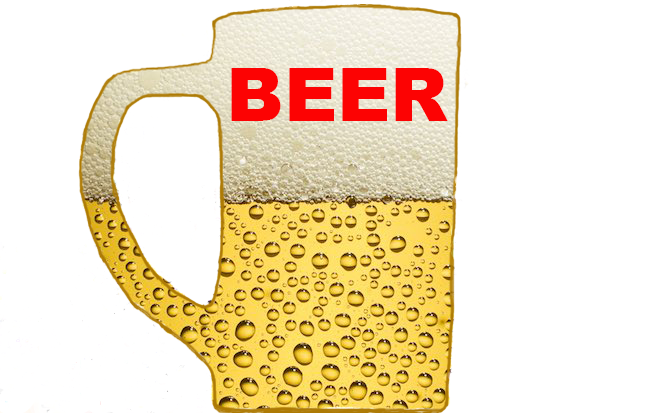
<style>
.page{position:relative;width:660px;height:413px;background:#ffffff}
.page>*{position:absolute;margin:0}
.t1{font:74px "Arial-Black";color:#fc0303}
</style>
<div class="page">
<p class="t1" style="left:231px;top:68px;width:217px;height:53px">BEER</p>
</div>
